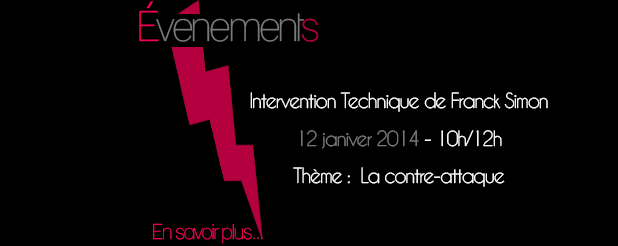
<style>
.page{position:relative;width:618px;height:246px;background:#000000}
.page>*{position:absolute;margin:0}
.t1{font:41.7px "Lane-Narrow";letter-spacing:-0.075em;color:#7a7a79}
.t2{font:41.7px "Lane-Narrow";letter-spacing:-0.075em;color:#f20055}
.t3{font:41.7px "Lane-Narrow";letter-spacing:-0.075em;color:#b50040}
.t4{font:19.8px/18.8px "CaviarDreams";letter-spacing:-0.075em;color:#ffffff}
.t5{font:19.8px/18.8px "CaviarDreams";letter-spacing:-0.075em;color:#7a7a79}
.t6{font:20.8px "Lane-Narrow";letter-spacing:-0.075em;color:#f20055}
</style>
<div class="page">
<p class="t1" style="left:139px;top:1px;width:180px;height:41px"><span class="t2">É</span>venement<span class="t3">s</span></p>
<p class="t4" style="left:250px;top:92px;width:298px;height:95px;text-align:center">Intervention Technique de Franck Simon<br><br><span class="t5">12 janiver 2014</span> - 10h/12h<br><br>Thème :  La contre-attaque</p>
<p class="t6" style="left:153px;top:223px;width:110px;height:21px">En savoir plus...</p>
</div>
